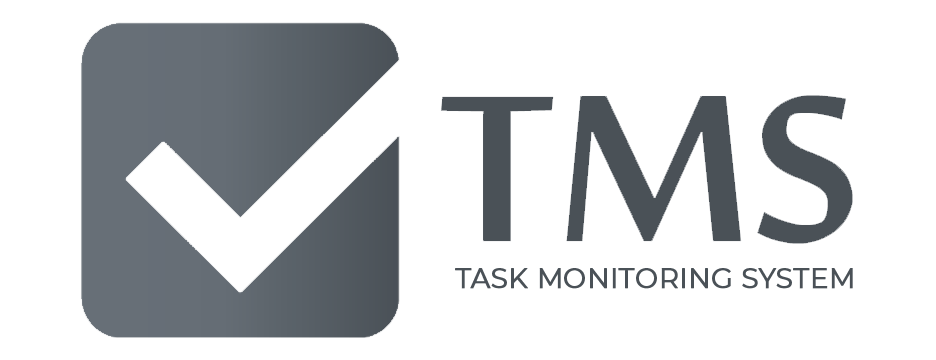
<style>
.page{position:relative;width:936px;height:360px;background:#ffffff}
.page>*{position:absolute;margin:0}
.t1{font:27.3px "Montserrat-Regular";color:#4a5157;font-weight:bold}
</style>
<div class="page">
<p class="t1" style="left:455px;top:268px;width:398px;height:21px">TASK MONITORING SYSTEM</p>
</div>
